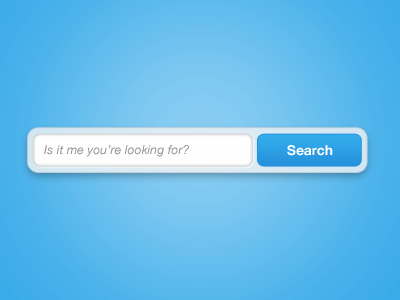
<style>
.page{position:relative;width:400px;height:300px}
.page>*{position:absolute;margin:0}
.t1{font:12.3px "HelveticaNeue-Italic";color:#949494}
.t2{font:13.7px "HelveticaNeue-Bold";color:#fefefe}
</style>
<div class="page">
<p class="t1" style="left:44px;top:145px;width:145px;height:12px">Is it me you’re looking for?</p>
<p class="t2" style="left:287px;top:145px;width:46px;height:11px">Search</p>
</div>
